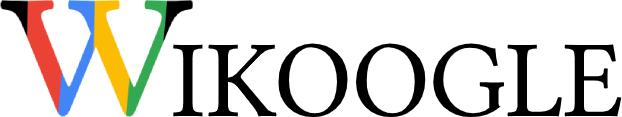
<style>
.page{position:relative;width:622px;height:117px;background:#ffffff}
.page>*{position:absolute;margin:0}
.t1{font:110px "LinLibertine";color:#000000}
.t2{font:150px "LinLibertine";color:#000000}
</style>
<div class="page">
<p class="t1" style="left:173px;top:43px;width:449px;height:75px"><span class="t2">    </span>IKOOGLE</p>
</div>
